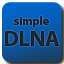
<style>
.page{position:relative;width:64px;height:64px}
.page>*{position:absolute;margin:0}
.t1{font:12px "MyriadPro-Bold";color:#1f2933}
.t2{font:22px "MyriadPro-Bold";color:#1f2933}
</style>
<div class="page">
<p class="t1" style="left:5px;top:16px;width:54px;height:30px;text-align:center">simple<br><span class="t2">DLNA</span></p>
</div>
